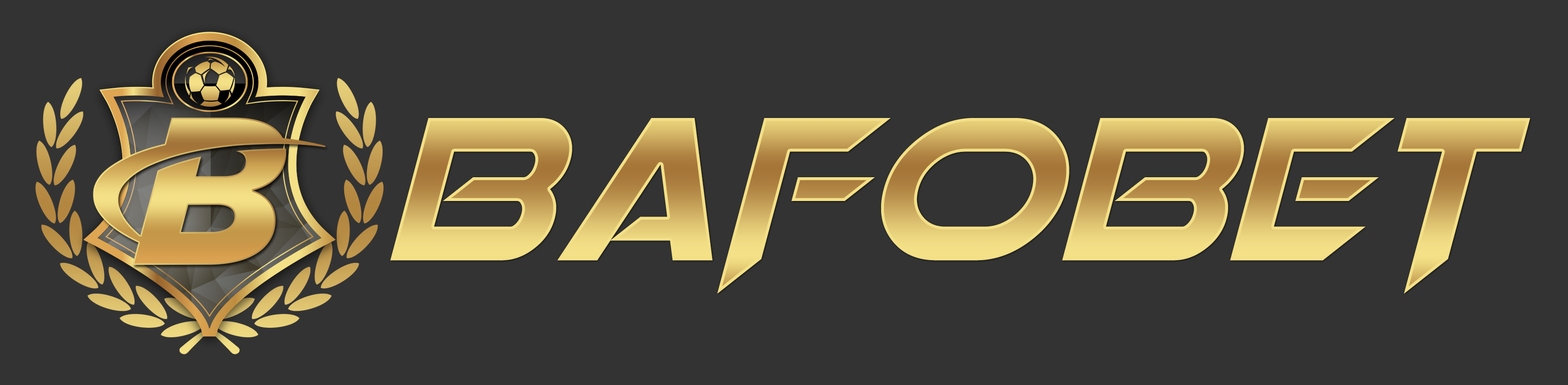
<style>
.page{position:relative;width:1568px;height:385px;background:#333333}
.page>*{position:absolute;margin:0}
.t1{font:202.3px "OrionPax-BoldItalic"}
</style>
<div class="page">
<p class="t1" style="left:390px;top:118px;width:1140px;height:176px">BAFOBET</p>
</div>
